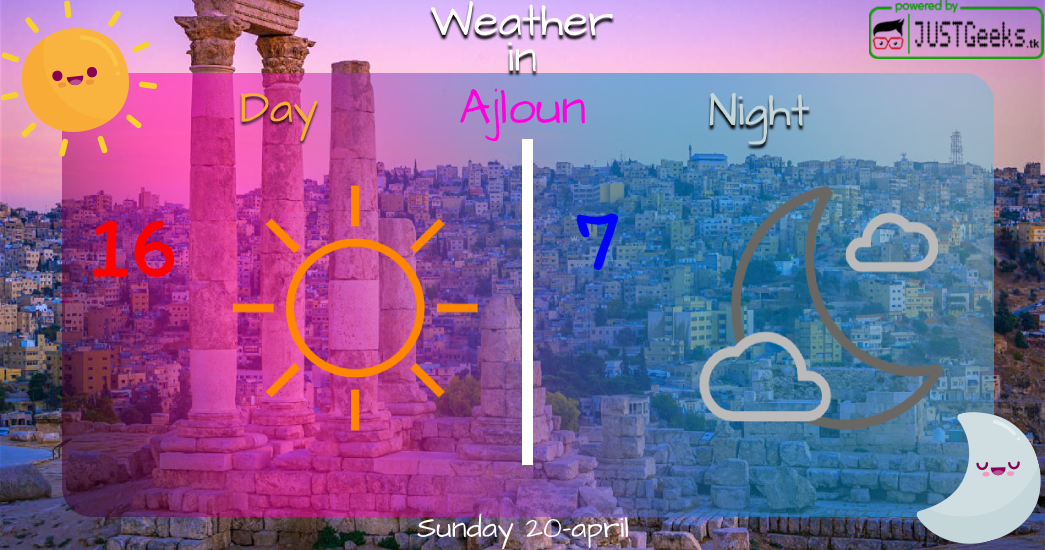
<style>
.page{position:relative;width:1045px;height:550px}
.page>*{position:absolute;margin:0}
.t1{font:46px "ArchitectsDaughter-Regular";color:#ffffff}
.t2{font:50px "ArchitectsDaughter-Regular";color:#ff00dd}
.t3{font:46px "ArchitectsDaughter-Regular";color:#f8ab37}
.t4{font:46px "ArchitectsDaughter-Regular";color:#c5d6db}
.t5{font:90px "Itim-Regular";color:#ff0000}
.t6{font:90px "Itim-Regular";color:#0000ff}
.t7{font:30px "ArchitectsDaughter-Regular";color:#ffffff}
</style>
<div class="page">
<p class="t1" style="left:431px;top:0px;width:182px;height:72px;text-align:center">Weather<br>in</p>
<p class="t2" style="left:460px;top:88px;width:125px;height:53px">Ajloun</p>
<p class="t3" style="left:241px;top:93px;width:77px;height:49px">Day</p>
<p class="t4" style="left:709px;top:92px;width:100px;height:53px">Night</p>
<p class="t5" style="left:93px;top:220px;width:82px;height:57px">16</p>
<p class="t6" style="left:576px;top:213px;width:43px;height:58px">7</p>
<p class="t7" style="left:417px;top:513px;width:211px;height:37px">Sunday 20-april</p>
</div>
